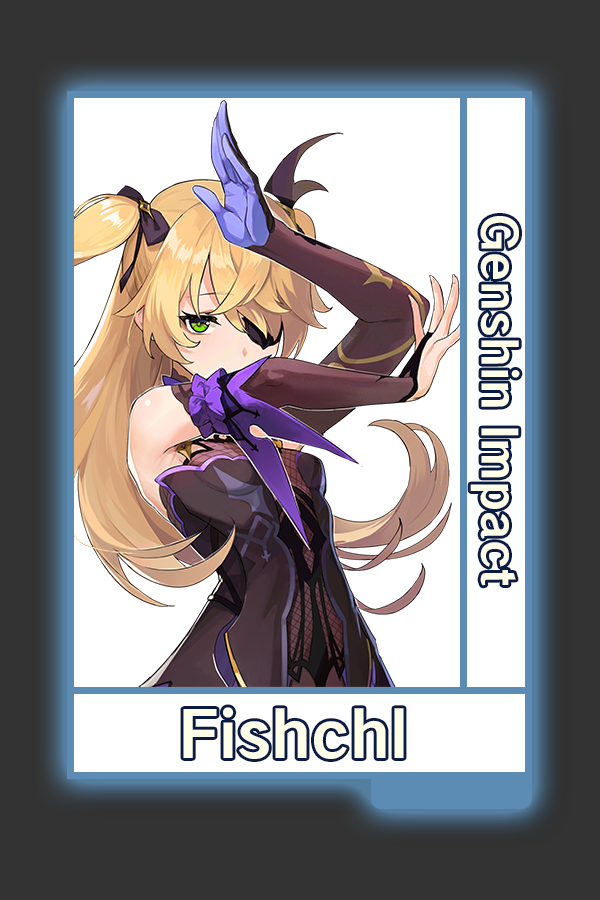
<style>
.page{position:relative;width:600px;height:900px;background:#ffffff}
.page>*{position:absolute;margin:0}
.t1{font:48.8px "HYWenHei-HEW";color:#fefef4}
.t2{font:65.2px "HYWenHei-HEW";color:#fefef4}
</style>
<div class="page">
<p class="t1" style="left:470px;top:216px;width:50px;height:370px;rotate:90deg">Genshin Impact</p>
<p class="t2" style="left:183px;top:707px;width:221px;height:52px">Fishchl</p>
</div>
